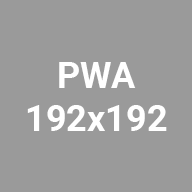
<style>
.page{position:relative;width:192px;height:192px;background:#9a9a9a}
.page>*{position:absolute;margin:0}
.t1{font:36px "Roboto-Bold";color:#ffffff}
</style>
<div class="page">
<p class="t1" style="left:27px;top:62px;width:140px;height:69px;text-align:center">PWA<br>192x192</p>
</div>
